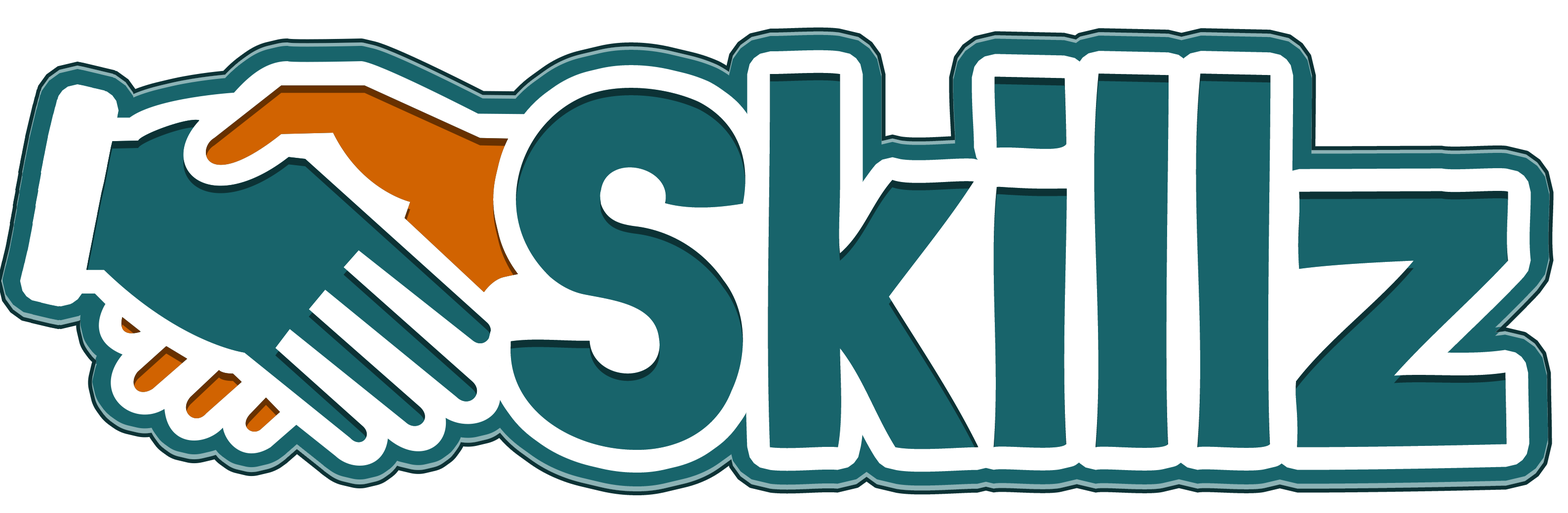
<style>
.page{position:relative;width:1568px;height:513px;background:#ffffff}
.page>*{position:absolute;margin:0}
.t1{font:514.3px "LondrinaSolid-Regular";letter-spacing:-0.01em;color:#18646b}
.t2{font:514.3px "LondrinaSolid-Regular";letter-spacing:-0.025em;color:#18646b}
</style>
<div class="page">
<p class="t1" style="left:510px;top:73px;width:998px;height:377px"><span class="t2">S</span>killz</p>
</div>
